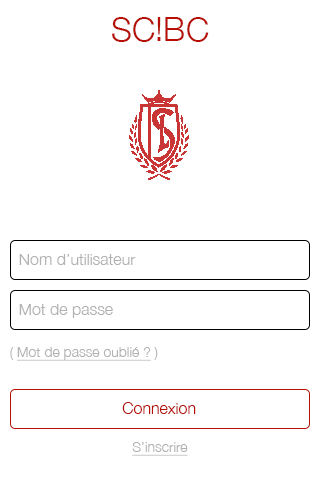
<style>
.page{position:relative;width:320px;height:480px;background:#ffffff}
.page>*{position:absolute;margin:0}
.t1{font:33.3px "HelveticaNeue-Light";color:#b60f06;text-transform:uppercase}
.t2{font:16px "HelveticaNeue-Light";color:#b2b2b2}
.t3{font:14px "HelveticaNeue-Light";color:#b2b2b2;text-decoration:underline}
.t4{font:14px "HelveticaNeue-Light";color:#b2b2b2}
.t5{font:16px "HelveticaNeue-Light";color:#b60f06}
</style>
<div class="page">
<p class="t1" style="left:112px;top:17px;width:97px;height:25px">SC!BC</p>
<p class="t2" style="left:19px;top:254px;width:117px;height:11px">Nom d’utilisateur</p>
<p class="t2" style="left:19px;top:304px;width:94px;height:14px">Mot de passe</p>
<p class="t3" style="left:10px;top:347px;width:148px;height:14px"><span class="t4">( </span>Mot de passe oublié ?<span class="t4"> )</span></p>
<p class="t5" style="left:122px;top:402px;width:74px;height:12px">Connexion</p>
<p class="t3" style="left:132px;top:442px;width:56px;height:14px">S’inscrire</p>
</div>
